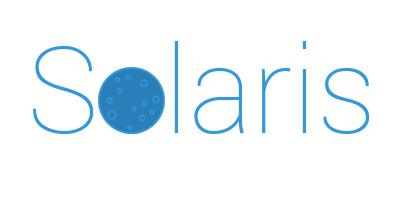
<style>
.page{position:relative;width:400px;height:200px;background:#ffffff}
.page>*{position:absolute;margin:0}
.t1{font:120px "Roboto-Thin";color:#3498db}
</style>
<div class="page">
<p class="t1" style="left:33px;top:41px;width:337px;height:93px">Solaris</p>
</div>
